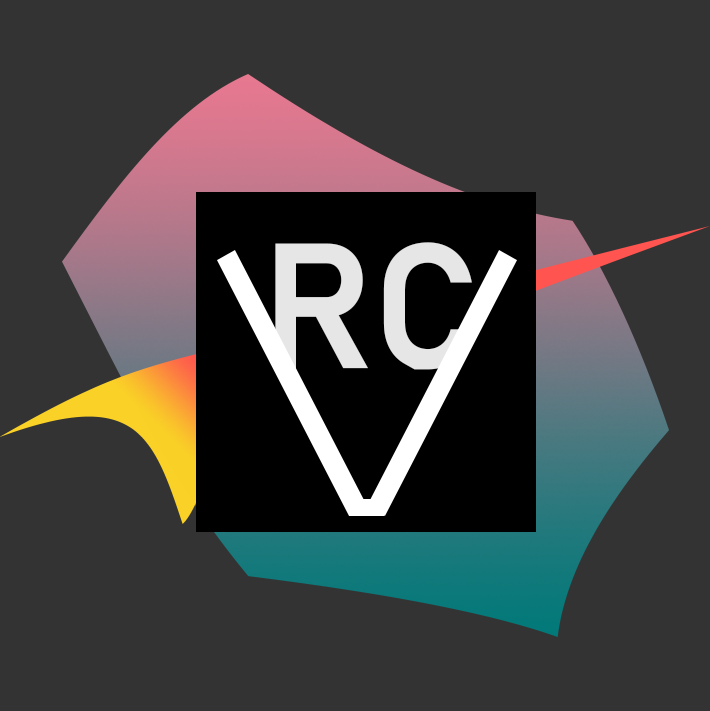
<style>
.page{position:relative;width:710px;height:711px;background:#333333}
.page>*{position:absolute;margin:0}
.t1{font:175px "Bahnschrift-SemiBold";color:#e6e6e6}
</style>
<div class="page">
<p class="t1" style="left:275px;top:242px;width:197px;height:128px">RC</p>
</div>
